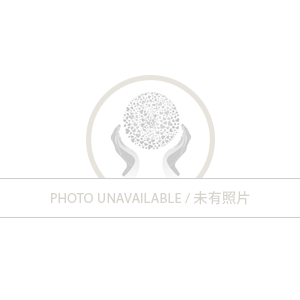
<style>
.page{position:relative;width:300px;height:300px;background:#ffffff}
.page>*{position:absolute;margin:0}
.t1{font:14px "Myriad-Roman";letter-spacing:0.025em;color:#d7d4ce}
.t2{font:14px "KozGoPr6N-Regular";letter-spacing:0.025em;color:#d7d4ce}
</style>
<div class="page">
<p class="t1" style="left:51px;top:191px;width:199px;height:14px">PHOTO UNAVAILABLE / <span class="t2">未有照片</span></p>
</div>
